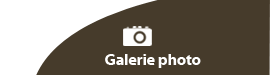
<style>
.page{position:relative;width:270px;height:75px;background:#463b2b}
.page>*{position:absolute;margin:0}
.t1{font:16.2px "MyriadWebPro-Bold";letter-spacing:-0.025em;color:#ffffff}
</style>
<div class="page">
<p class="t1" style="left:105px;top:54px;width:96px;height:14px">Galerie photo</p>
</div>
